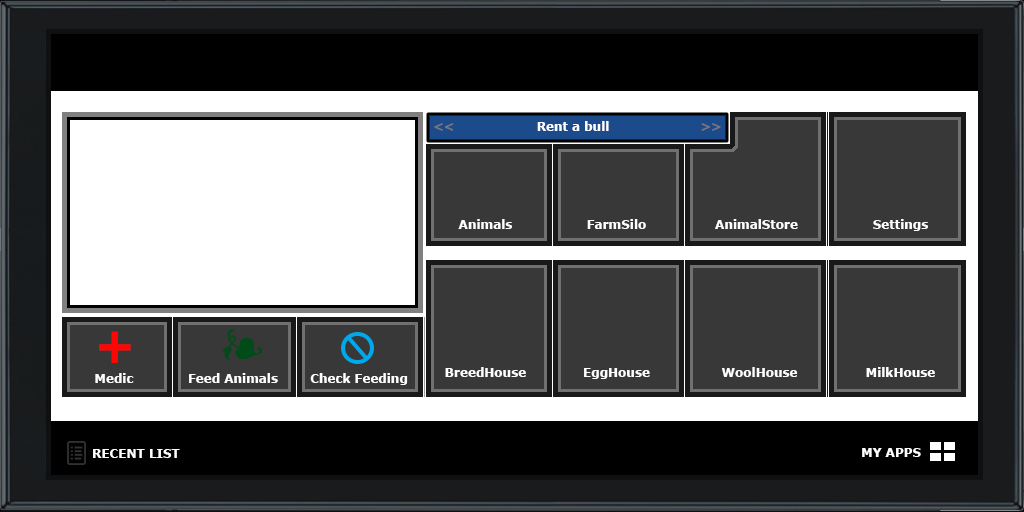
<style>
.page{position:relative;width:1024px;height:512px;background:#ffffff}
.page>*{position:absolute;margin:0}
.t1{font:12px "Verdana-Bold";color:#7a7676}
.t2{font:12px "Verdana-Bold";color:#fefefe}
.t3{font:48px "Verdana-Bold";color:#fe0606}
.t4{font:12px "Verdana-Bold";color:#fefdfd}
</style>
<div class="page">
<p class="t1" style="left:434px;top:123px;width:20px;height:8px">&lt;&lt;</p>
<p class="t2" style="left:537px;top:121px;width:72px;height:10px">Rent a bull</p>
<p class="t1" style="left:701px;top:123px;width:20px;height:8px">&gt;&gt;</p>
<p class="t2" style="left:458px;top:219px;width:54px;height:10px">Animals</p>
<p class="t2" style="left:587px;top:219px;width:59px;height:10px">FarmSilo</p>
<p class="t2" style="left:715px;top:219px;width:83px;height:10px">AnimalStore</p>
<p class="t2" style="left:873px;top:219px;width:55px;height:12px">Settings</p>
<p class="t3" style="left:99px;top:331px;width:32px;height:32px">+</p>
<p class="t4" style="left:95px;top:373px;width:39px;height:10px">Medic</p>
<p class="t4" style="left:189px;top:373px;width:89px;height:10px">Feed Animals</p>
<p class="t4" style="left:310px;top:373px;width:98px;height:12px">Check Feeding</p>
<p class="t2" style="left:445px;top:367px;width:81px;height:10px">BreedHouse</p>
<p class="t2" style="left:584px;top:368px;width:66px;height:11px">EggHouse</p>
<p class="t2" style="left:722px;top:367px;width:76px;height:10px">WoolHouse</p>
<p class="t2" style="left:866px;top:367px;width:69px;height:10px">MilkHouse</p>
<p class="t2" style="left:93px;top:449px;width:87px;height:9px">RECENT LIST</p>
<p class="t2" style="left:862px;top:448px;width:59px;height:9px">MY APPS</p>
</div>
